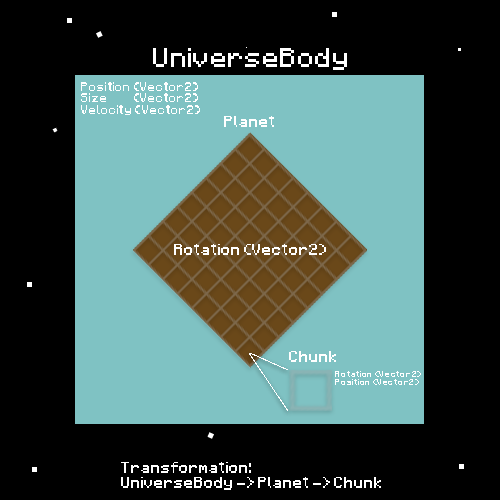
<style>
.page{position:relative;width:500px;height:500px;background:#000000}
.page>*{position:absolute;margin:0}
.t1{font:21.8px "Minecraft";color:#ffffff}
.t2{font:9.9px "Minecraft";color:#ffffff}
.t3{font:12.5px "Minecraft";color:#ffffff}
.t4{font:7.1px "Minecraft";color:#ffffff}
</style>
<div class="page">
<p class="t1" style="left:153px;top:48px;width:194px;height:22px">UniverseBody</p>
<p class="t2" style="left:81px;top:82px;width:119px;height:33px">Position (Vector2)<br>Size           (Vector2)<br>Velocity (Vector2)</p>
<p class="t3" style="left:224px;top:116px;width:50px;height:11px">Planet</p>
<p class="t3" style="left:174px;top:244px;width:152px;height:11px">Rotation (Vector2)</p>
<p class="t3" style="left:289px;top:351px;width:47px;height:11px">Chunk</p>
<p class="t4" style="left:335px;top:371px;width:86px;height:14px">Rotation (Vector2)<br>Position (Vector2)</p>
<p class="t3" style="left:121px;top:462px;width:260px;height:28px">Transformation:<br>UniverseBody -&gt; Planet -&gt; Chunk</p>
</div>
